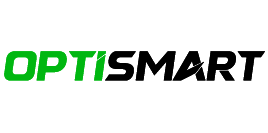
<style>
.page{position:relative;width:268px;height:133px;background:#ffffff}
.page>*{position:absolute;margin:0}
.t1{font:41.7px "Semakin-Regular";color:#000000}
.t2{font:41.7px "Semakin-Regular";color:#00b711}
</style>
<div class="page">
<p class="t1" style="left:4px;top:51px;width:261px;height:30px"><span class="t2">Opti</span>Smart</p>
<p class="t1" style="left:4px;top:51px;width:261px;height:30px"><span class="t2">Opti</span>Smart</p>
</div>
